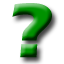
<style>
.page{position:relative;width:64px;height:64px;background:#ffffff}
.page>*{position:absolute;margin:0}
.t1{font:80px "ErasITC-Bold"}
</style>
<div class="page">
<p class="t1" style="left:12px;top:3px;width:40px;height:55px">?</p>
</div>
